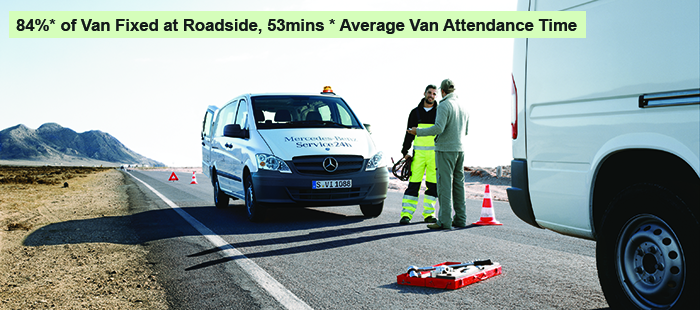
<style>
.page{position:relative;width:700px;height:310px}
.page>*{position:absolute;margin:0}
.t1{font:16.7px "Arial-BoldMT";color:#131918}
</style>
<div class="page">
<p class="t1" style="left:16px;top:19px;width:561px;height:15px">84%* of Van Fixed at Roadside, 53mins * Average Van Attendance Time</p>
</div>
